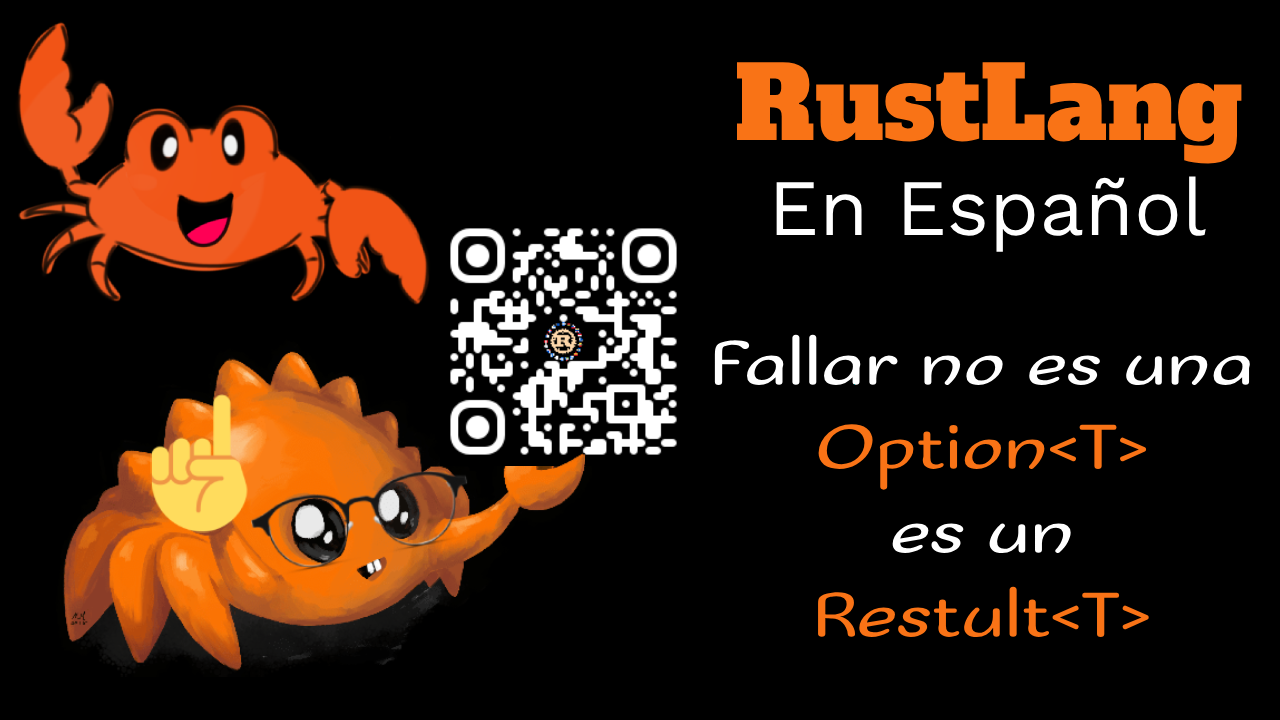
<style>
.page{position:relative;width:1280px;height:720px;background:#000000}
.page>*{position:absolute;margin:0}
.t1{font:100px "AlfaSlabOne-Regular";color:#f97316}
.t2{font:80px "WorkSans-Regular";color:#ffffff}
.t3{font:70px "SofadiOne-Regular";color:#ffffff}
.t4{font:70px "SofadiOne-Regular";color:#f97316}
</style>
<div class="page">
<p class="t1" style="left:737px;top:62px;width:505px;height:102px">RustLang</p>
<p class="t2" style="left:776px;top:176px;width:430px;height:76px">En Español</p>
<p class="t3" style="left:714px;top:334px;width:536px;height:303px;text-align:center">Fallar no es una<br><span class="t4">Option&lt;T&gt;<br></span>es un<br><span class="t4">Restult&lt;T&gt;</span></p>
</div>
